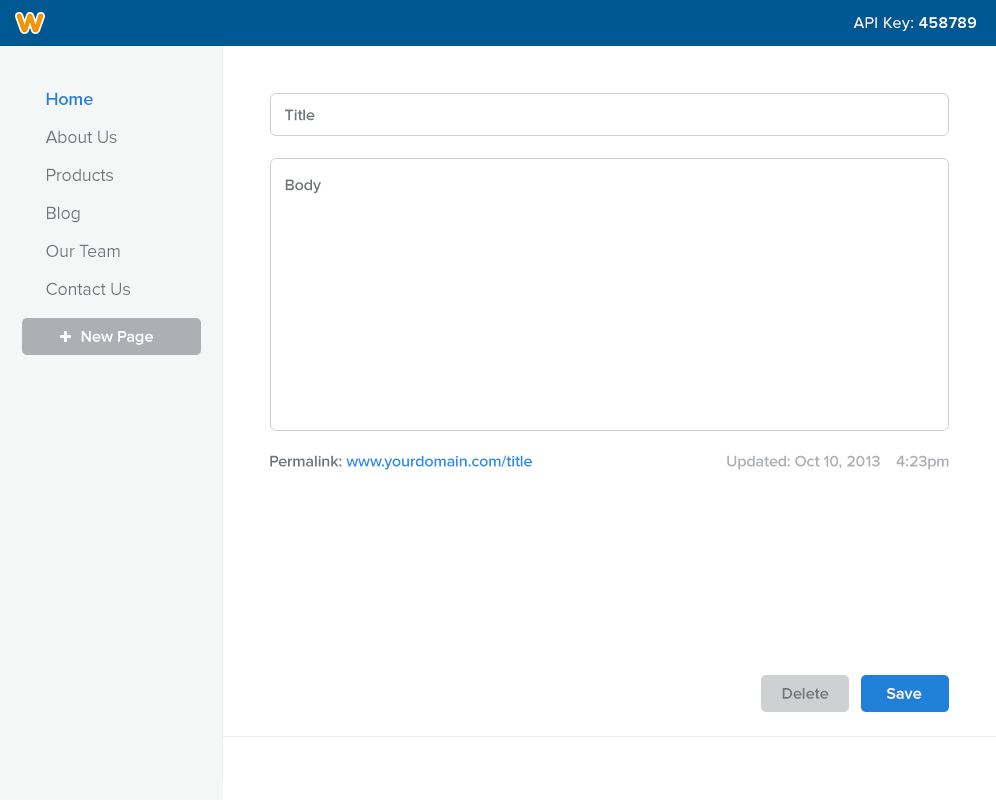
<style>
.page{position:relative;width:996px;height:805px;background:#ffffff}
.page>*{position:absolute;margin:0}
.t1{font:16px "ProximaNova-Regular";letter-spacing:0.025em;color:#ffffff}
.t2{font:16px "ProximaNova-Semibold";letter-spacing:0.025em;color:#ffffff}
.t3{font:18px/38px "ProximaNova-Regular";letter-spacing:-0.01em;color:#6f757a}
.t4{font:18px/38px "ProximaNova-Semibold";letter-spacing:-0.01em;color:#2181d9}
.t5{font:16px "ProximaNova-Semibold";letter-spacing:-0.01em;color:#6f757a}
.t6{font:16px "ProximaNova-Semibold";color:#ffffff}
.t7{font:16px "ProximaNova-Semibold";letter-spacing:-0.01em;color:#2990ea}
.t8{font:16px "ProximaNova-Semibold";letter-spacing:-0.01em;color:#acb0b4}
.t9{font:16px "ProximaNova-Semibold";color:#6f757a}
</style>
<div class="page">
<p class="t1" style="left:853px;top:17px;width:123px;height:14px">API Key: <span class="t2">458789</span></p>
<p class="t3" style="left:45px;top:92px;width:85px;height:203px"><span class="t4">Home<br></span>About Us<br>Products<br>Blog<br>Our Team<br>Contact Us</p>
<p class="t5" style="left:285px;top:109px;width:30px;height:12px">Title</p>
<p class="t5" style="left:285px;top:179px;width:36px;height:15px">Body</p>
<p class="t6" style="left:81px;top:331px;width:72px;height:14px">New Page</p>
<p class="t7" style="left:270px;top:455px;width:262px;height:15px"><span class="t5">Permalink: </span>www.yourdomain.com/title</p>
<p class="t8" style="left:727px;top:455px;width:222px;height:15px">Updated: Oct 10, 2013    4:23pm</p>
<p class="t9" style="left:782px;top:688px;width:47px;height:11px">Delete</p>
<p class="t6" style="left:887px;top:688px;width:35px;height:11px">Save</p>
</div>
